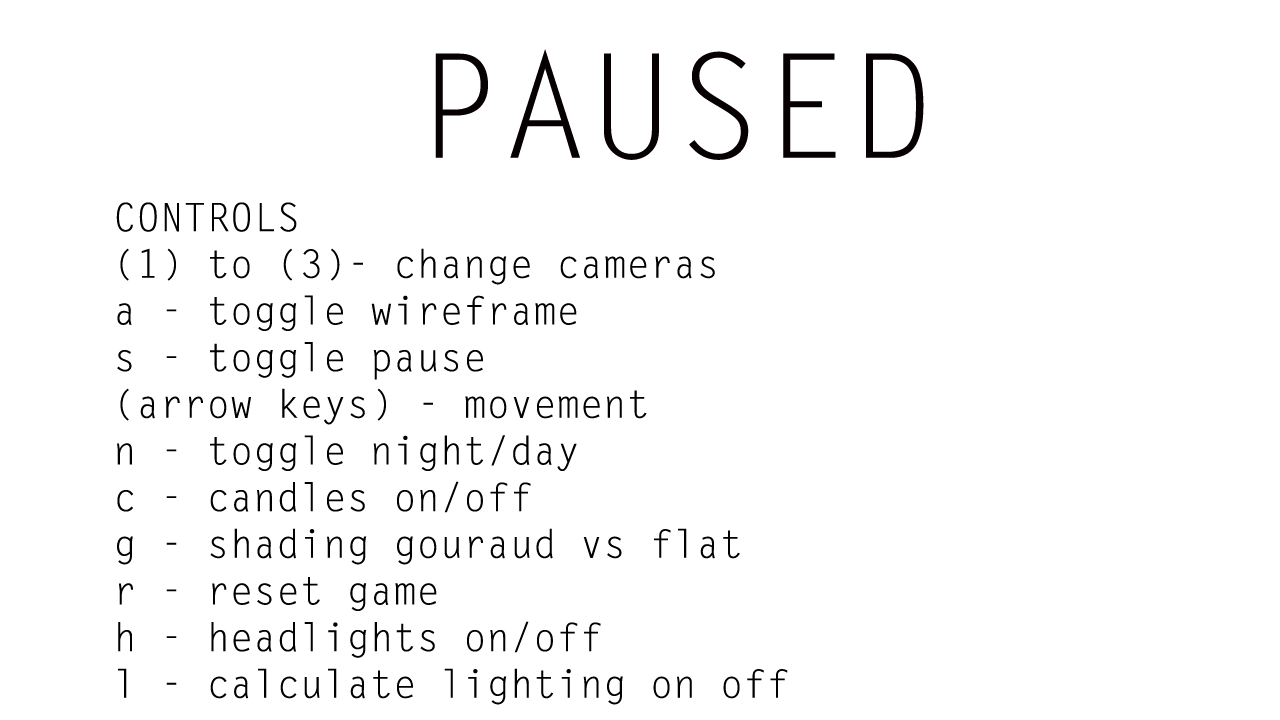
<style>
.page{position:relative;width:1280px;height:720px;background:#ffffff}
.page>*{position:absolute;margin:0}
.t1{font:144.4px "LetterGothicStd";color:#060003}
.t2{font:38.9px "LetterGothicStd";color:#000000}
</style>
<div class="page">
<p class="t1" style="left:435px;top:49px;width:489px;height:111px">PAUSED</p>
<p class="t2" style="left:116px;top:202px;width:672px;height:503px">CONTROLS<br>(1) to (3)- change cameras<br>a - toggle wireframe<br>s - toggle pause<br>(arrow keys) - movement<br>n - toggle night/day<br>c - candles on/off<br>g - shading gouraud vs flat<br>r - reset game<br>h - headlights on/off<br>l - calculate lighting on off</p>
</div>
